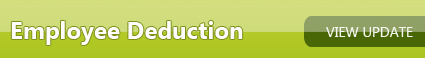
<style>
.page{position:relative;width:425px;height:58px}
.page>*{position:absolute;margin:0}
.t1{font:24px "SegoeUI-Bold";color:#fefefe}
.t2{font:14px "SegoeUI";color:#f6f7f1}
</style>
<div class="page">
<p class="t1" style="left:11px;top:21px;width:232px;height:24px">Employee Deduction</p>
<p class="t2" style="left:326px;top:27px;width:87px;height:10px">VIEW UPDATE</p>
</div>
